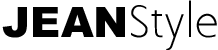
<style>
.page{position:relative;width:218px;height:50px;background:#ffffff}
.page>*{position:absolute;margin:0}
.t1{font:39.6px "AaarghNormal";color:#000000}
.t2{font:41.7px "Arial-Black";color:#000000}
</style>
<div class="page">
<p class="t1" style="left:2px;top:0px;width:215px;height:51px"><span class="t2">JEAN</span>Style</p>
</div>
